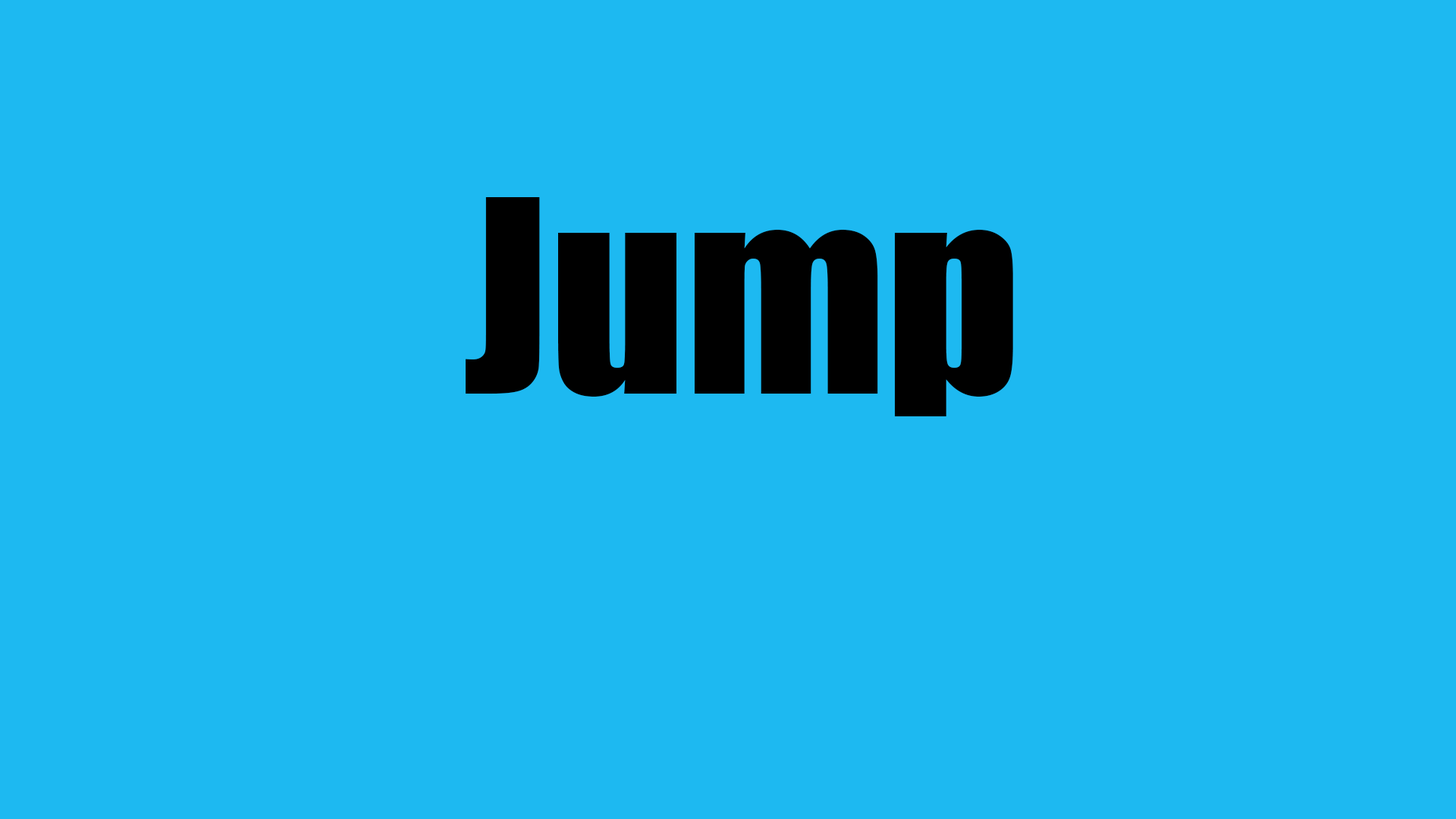
<style>
.page{position:relative;width:1456px;height:819px;background:#1db9f1}
.page>*{position:absolute;margin:0}
.t1{font:248.1px "Impact";color:#000000;scale:1.05 1}
</style>
<div class="page">
<p class="t1" style="left:466px;top:197px;width:547px;height:219px">Jump</p>
</div>
